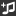
<style>
.page{position:relative;width:16px;height:16px;background:#333333}
.page>*{position:absolute;margin:0}
.t1{font:8px "LucidaConsole";color:#ffffff;font-weight:bold}
.t2{font:14px "LucidaConsole";color:#ffffff;font-weight:bold;scale:1.5 1}
</style>
<div class="page">
<p class="t1" style="left:1px;top:2px;width:5px;height:6px">+</p>
<p class="t2" style="left:2px;top:1px;width:13px;height:14px">♫</p>
</div>
